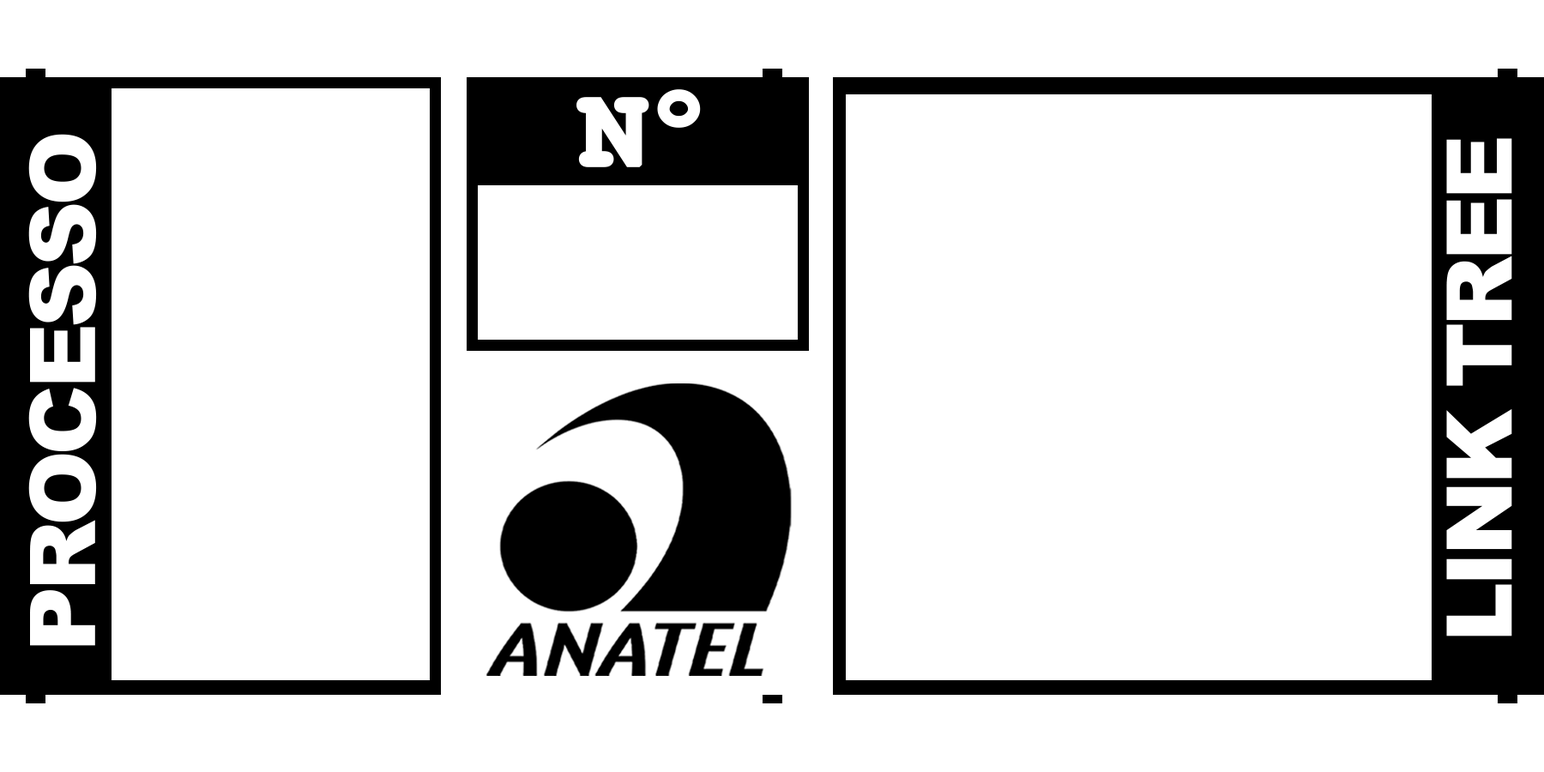
<style>
.page{position:relative;width:1544px;height:772px;background:#ffffff}
.page>*{position:absolute;margin:0}
.t1{font:112.6px "CourierNewPS-BoldMT";letter-spacing:-0.05em;color:#ffffff;font-weight:bold}
.t2{font:90.8px "Arial-Black";letter-spacing:-0.05em;color:#ffffff}
</style>
<div class="page">
<p class="t1" style="left:577px;top:89px;width:124px;height:78px">Nº</p>
<p class="t2" style="left:28px;top:134px;width:69px;height:512px;rotate:-90deg">PROCESSO</p>
<p class="t2" style="left:1446px;top:138px;width:67px;height:499px;rotate:-90deg">LINK TREE</p>
</div>
